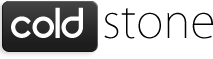
<style>
.page{position:relative;width:213px;height:59px;background:#ffffff}
.page>*{position:absolute;margin:0}
.t1{font:48px "REZ";color:#ffffff}
.t2{font:46px "KozGoPro-ExtraLight";color:#000000}
</style>
<div class="page">
<p class="t1" style="left:11px;top:7px;width:72px;height:31px">cold</p>
<p class="t2" style="left:104px;top:8px;width:109px;height:31px">stone</p>
</div>
